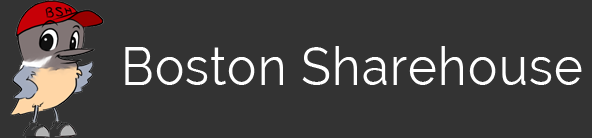
<style>
.page{position:relative;width:592px;height:138px;background:#333333}
.page>*{position:absolute;margin:0}
.t1{font:52.8px "Raleway";letter-spacing:0.025em;color:#ffffff;scale:0.93 1}
</style>
<div class="page">
<p class="t1" style="left:125px;top:46px;width:457px;height:39px">Boston Sharehouse</p>
</div>
